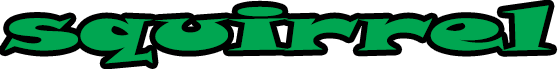
<style>
.page{position:relative;width:558px;height:69px;background:#ffffff}
.page>*{position:absolute;margin:0}
.t1{font:60px "SnapITC-Regular";color:#00a651;scale:2 1}
</style>
<div class="page">
<p class="t1" style="left:4px;top:5px;width:548px;height:59px">squirrel</p>
</div>
